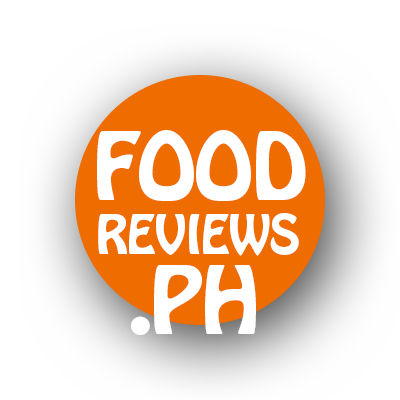
<style>
.page{position:relative;width:400px;height:400px;background:#ffffff}
.page>*{position:absolute;margin:0}
.t1{font:83.3px "HoboStd";letter-spacing:-0.02em;color:#ffffff}
.t2{font:48.6px "HoboStd";letter-spacing:-0.02em;color:#ffffff}
</style>
<div class="page">
<p class="t1" style="left:97px;top:130px;width:209px;height:71px">FOOD</p>
<p class="t2" style="left:98px;top:213px;width:201px;height:43px">REVIEWS</p>
<p class="t1" style="left:131px;top:265px;width:125px;height:70px">.PH</p>
</div>
